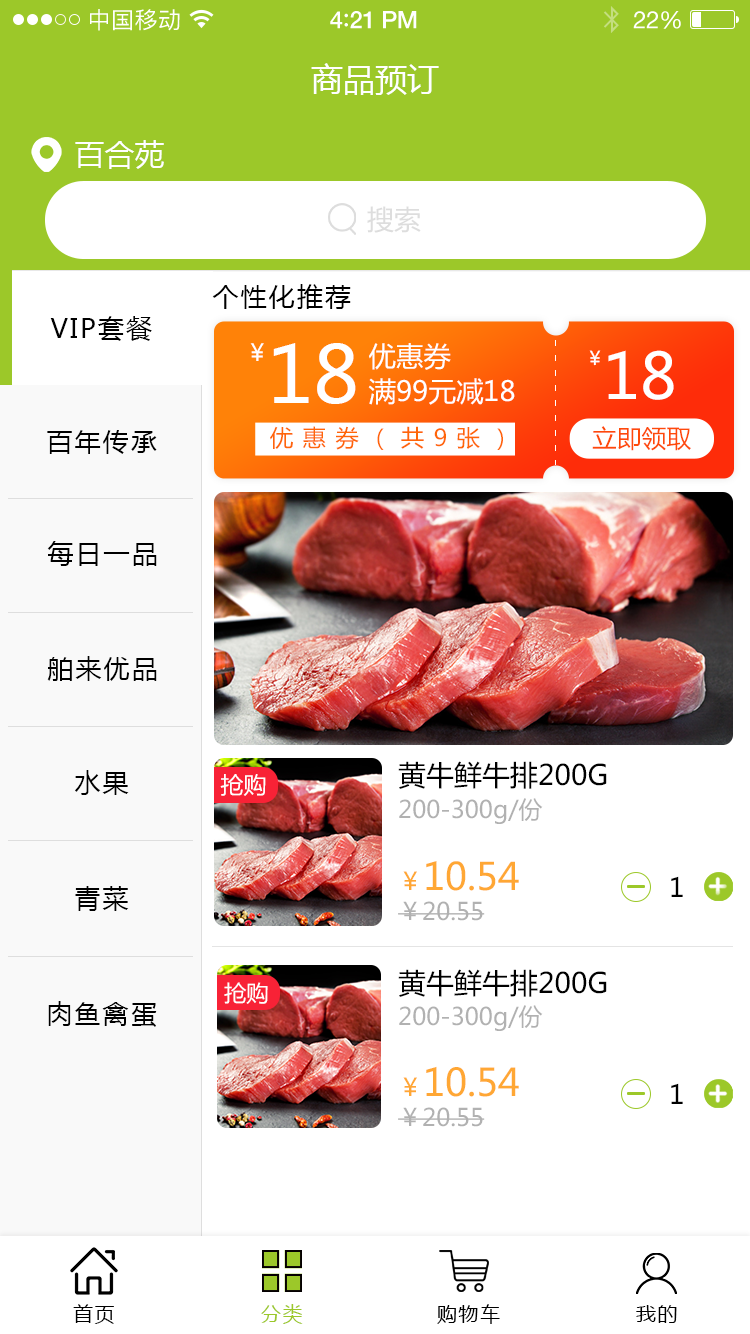
<style>
.page{position:relative;width:750px;height:1334px;background:#ffffff}
.page>*{position:absolute;margin:0}
.t1{font:23px "PingFangSC-Regular";letter-spacing:0.02em;color:#ffffff}
.t2{font:24px "HelveticaNeue-Medium";letter-spacing:-0.02em;color:#ffffff}
.t3{font:26px "Avenir-Medium";letter-spacing:-0.02em;color:#ffffff}
.t4{font:24px "HelveticaNeue";letter-spacing:-0.02em;color:#ffffff}
.t5{font:32px "MicrosoftYaHei";color:#ffffff;text-transform:uppercase}
.t6{font:30px "MicrosoftYaHei";color:#ffffff;text-transform:uppercase}
.t7{font:26.9px "MicrosoftYaHei";color:#dddddd;text-transform:uppercase}
.t8{font:26px "MicrosoftYaHei";letter-spacing:0.08em;color:#000000;text-transform:uppercase}
.t9{font:23.6px "MicrosoftYaHei";color:#ffffff;text-transform:uppercase}
.t10{font:78.5px "MicrosoftYaHei";color:#ffffff;text-transform:uppercase}
.t11{font:27.4px "MicrosoftYaHei";color:#ffffff;text-transform:uppercase}
.t12{font:18.9px "MicrosoftYaHei";color:#ffffff;text-transform:uppercase}
.t13{font:62.7px "MicrosoftYaHei";color:#ffffff;text-transform:uppercase}
.t14{font:23.4px "MicrosoftYaHei";letter-spacing:0.4em;color:#ff6608;text-transform:uppercase}
.t15{font:24.7px "MicrosoftYaHei";color:#fe4a09;text-transform:uppercase}
.t16{font:28px "MicrosoftYaHei";color:#000000;text-transform:uppercase}
.t17{font:23px "MicrosoftYaHei";color:#ffffff;text-transform:uppercase}
.t18{font:24px "MicrosoftYaHei";color:#b1b1b1}
.t19{font:37.6px "MicrosoftYaHei";color:#ffa734}
.t20{font:24.4px "MicrosoftYaHei";color:#ffa734}
.t21{font:26.3px "MicrosoftYaHei";letter-spacing:0.08em;color:#000000;text-transform:uppercase}
.t22{font:22.4px "MicrosoftYaHei";color:#ffffff;text-transform:uppercase}
.t23{font:37.8px "MicrosoftYaHei";color:#ffa734}
.t24{font:24.6px "MicrosoftYaHei";color:#ffa734}
.t25{font:20px "MicrosoftYaHei";letter-spacing:0.08em;color:#000000;text-transform:uppercase}
.t26{font:20px "MicrosoftYaHei";letter-spacing:0.08em;color:#9cc829;text-transform:uppercase}
</style>
<div class="page">
<p class="t1" style="left:90px;top:9px;width:90px;height:22px">中国移动</p>
<p class="t2" style="left:330px;top:11px;width:87px;height:18px">4<span class="t3">:</span>21 PM</p>
<p class="t4" style="left:633px;top:11px;width:48px;height:18px">22%</p>
<p class="t5" style="left:311px;top:63px;width:128px;height:32px">商品预订</p>
<p class="t6" style="left:75px;top:140px;width:89px;height:29px">百合苑</p>
<p class="t7" style="left:367px;top:206px;width:54px;height:27px">搜索</p>
<p class="t8" style="left:212px;top:284px;width:139px;height:25px">个性化推荐</p>
<p class="t8" style="left:50px;top:316px;width:102px;height:25px">VIP套餐</p>
<p class="t9" style="left:250px;top:343px;width:14px;height:18px">￥</p>
<p class="t10" style="left:273px;top:343px;width:83px;height:61px">18</p>
<p class="t11" style="left:369px;top:343px;width:82px;height:27px">优惠券</p>
<p class="t12" style="left:589px;top:350px;width:12px;height:16px">￥</p>
<p class="t13" style="left:608px;top:350px;width:66px;height:50px">18</p>
<p class="t11" style="left:368px;top:378px;width:147px;height:27px">满99元减18</p>
<p class="t8" style="left:47px;top:430px;width:110px;height:24px">百年传承</p>
<p class="t14" style="left:270px;top:426px;width:233px;height:24px">优惠券（共9张）</p>
<p class="t15" style="left:592px;top:426px;width:99px;height:25px">立即领取</p>
<p class="t8" style="left:47px;top:541px;width:110px;height:25px">每日一品</p>
<p class="t8" style="left:47px;top:656px;width:110px;height:25px">舶来优品</p>
<p class="t16" style="left:398px;top:761px;width:209px;height:28px">黄牛鲜牛排200g</p>
<p class="t8" style="left:75px;top:770px;width:54px;height:25px">水果</p>
<p class="t17" style="left:220px;top:774px;width:46px;height:22px">抢购</p>
<p class="t18" style="left:399px;top:798px;width:144px;height:26px">200-300g/份</p>
<p class="t19" style="left:403px;top:861px;width:116px;height:30px"><span class="t20">￥</span>10.54</p>
<p class="t21" style="left:671px;top:876px;width:12px;height:21px">1</p>
<p class="t8" style="left:75px;top:886px;width:54px;height:25px">青菜</p>
<p class="t18" style="left:398px;top:901px;width:87px;height:20px">￥20.55</p>
<p class="t16" style="left:398px;top:969px;width:209px;height:28px">黄牛鲜牛排200g</p>
<p class="t22" style="left:224px;top:982px;width:44px;height:22px">抢购</p>
<p class="t8" style="left:48px;top:1001px;width:109px;height:26px">肉鱼禽蛋</p>
<p class="t18" style="left:399px;top:1005px;width:144px;height:26px">200-300g/份</p>
<p class="t23" style="left:403px;top:1066px;width:116px;height:31px"><span class="t24">￥</span>10.54</p>
<p class="t21" style="left:671px;top:1083px;width:12px;height:21px">1</p>
<p class="t18" style="left:398px;top:1107px;width:87px;height:20px">￥20.55</p>
<p class="t25" style="left:73px;top:1304px;width:41px;height:20px">首页</p>
<p class="t26" style="left:261px;top:1304px;width:42px;height:20px">分类</p>
<p class="t25" style="left:437px;top:1304px;width:63px;height:20px">购物车</p>
<p class="t25" style="left:636px;top:1305px;width:41px;height:18px">我的</p>
</div>
